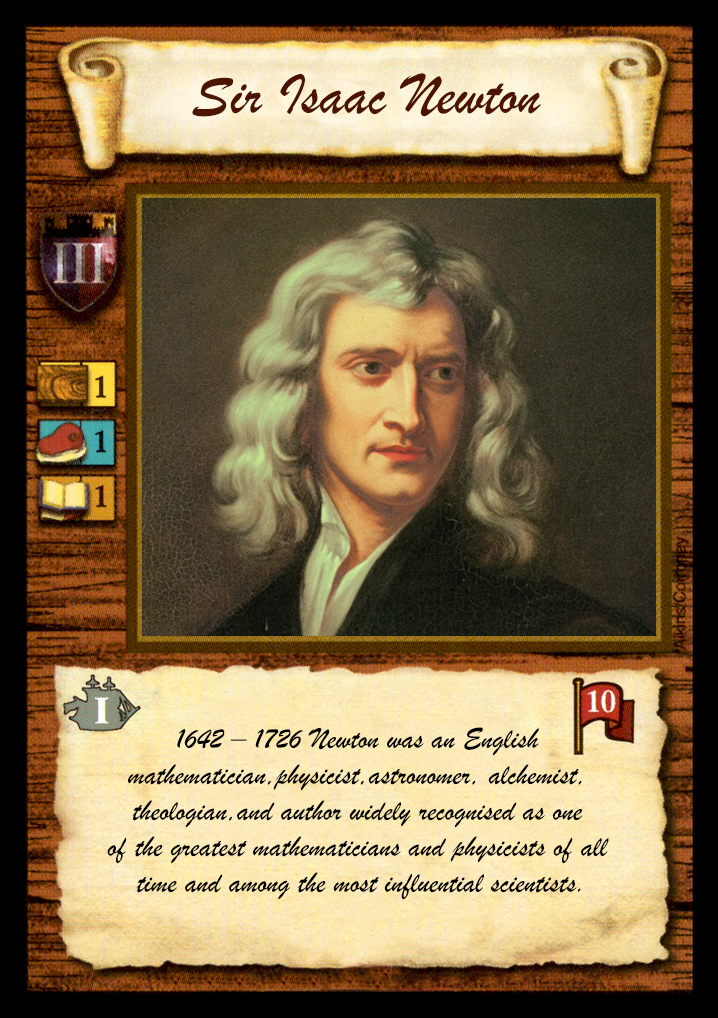
<style>
.page{position:relative;width:718px;height:1018px}
.page>*{position:absolute;margin:0}
.t1{font:60px "BrushScriptMT";color:#4c1400}
.t2{font:30px "BrushScriptMT";color:#000000}
</style>
<div class="page">
<p class="t1" style="left:192px;top:73px;width:349px;height:44px">Sir Isaac Newton</p>
<p class="t2" style="left:107px;top:727px;width:502px;height:173px;text-align:center">1642 – 1726 Newton was an English <br>mathematician,physicist,astronomer, alchemist, <br>theologian,and author widely recognised as one <br>of the greatest mathematicians and physicists of all <br>time and among the most influential scientists.</p>
</div>
